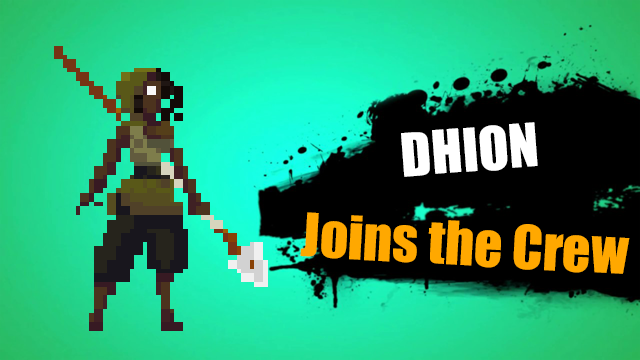
<style>
.page{position:relative;width:640px;height:360px}
.page>*{position:absolute;margin:0}
.t1{font:55.5px "Impact";color:#ffffff}
.t2{font:55.5px "Impact";color:#ffa800}
</style>
<div class="page">
<p class="t1" style="left:401px;top:122px;width:137px;height:55px;rotate:-4deg">DHION</p>
<p class="t1" style="left:404px;top:123px;width:134px;height:53px;rotate:-4deg">RAYLA</p>
<p class="t2" style="left:300px;top:212px;width:330px;height:62px;rotate:3deg">Joins the Crew</p>
<p class="t2" style="left:300px;top:212px;width:330px;height:62px;rotate:3deg">Joins the Crew</p>
</div>
